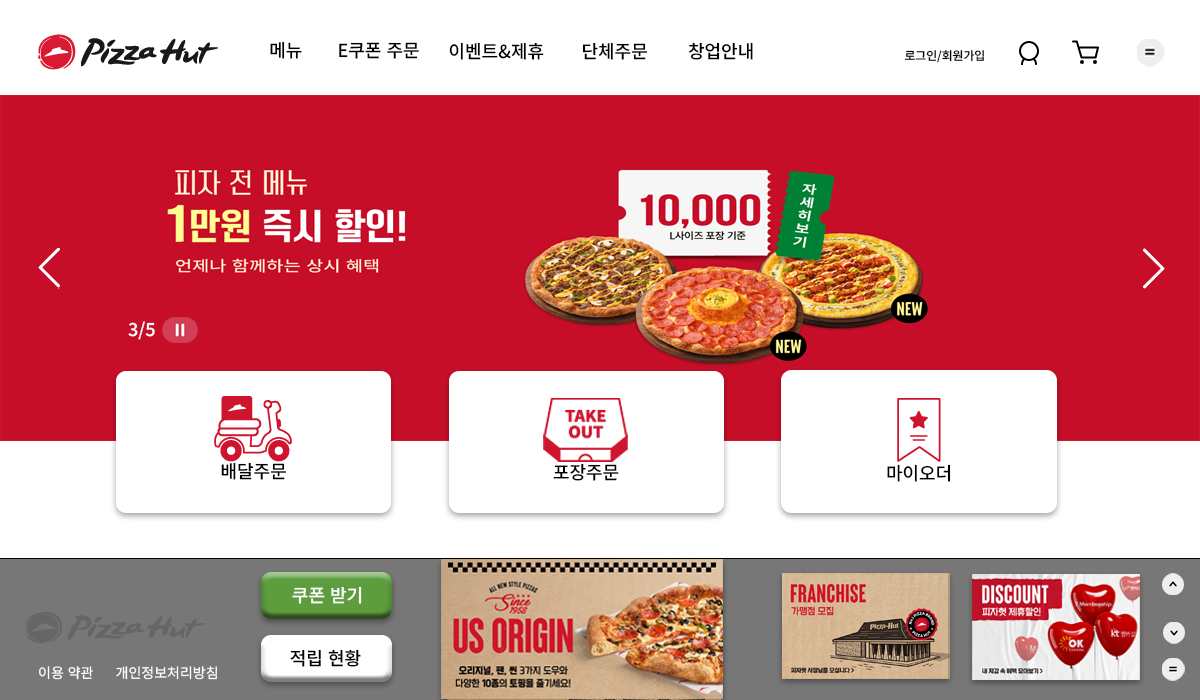
<style>
.page{position:relative;width:1200px;height:700px;background:#ffffff}
.page>*{position:absolute;margin:0}
.t1{font:18px "NotoSansKR-Medium";color:#000000}
.t2{font:18px "NotoSansKR-Medium";color:#ffffff}
.t3{font:11.8px "NotoSansKR-Medium";color:#000000}
.t4{font:14px "NotoSansKR-Regular";color:#ffffff}
</style>
<div class="page">
<p class="t1" style="left:260px;top:41px;width:159px;height:21px"><span class="t2">L</span>메뉴 <span class="t2">psu</span>E쿠폰 주문</p>
<p class="t1" style="left:449px;top:42px;width:95px;height:18px">이벤트&amp;제휴</p>
<p class="t1" style="left:582px;top:42px;width:65px;height:18px">단체주문</p>
<p class="t1" style="left:688px;top:42px;width:65px;height:18px">창업안내</p>
<p class="t3" style="left:904px;top:50px;width:80px;height:13px">로그인/회원가입</p>
<p class="t2" style="left:128px;top:321px;width:27px;height:19px">3/5</p>
<p class="t1" style="left:221px;top:462px;width:65px;height:18px">배달주문</p>
<p class="t1" style="left:553px;top:463px;width:66px;height:18px">포장주문</p>
<p class="t1" style="left:887px;top:464px;width:64px;height:18px">마이오더</p>
<p class="t2" style="left:292px;top:586px;width:70px;height:18px">쿠폰 받기</p>
<p class="t1" style="left:290px;top:649px;width:71px;height:18px">적립 현황</p>
<p class="t4" style="left:39px;top:666px;width:54px;height:14px">이용 약관</p>
<p class="t4" style="left:116px;top:666px;width:101px;height:14px">개인정보처리방침</p>
</div>
